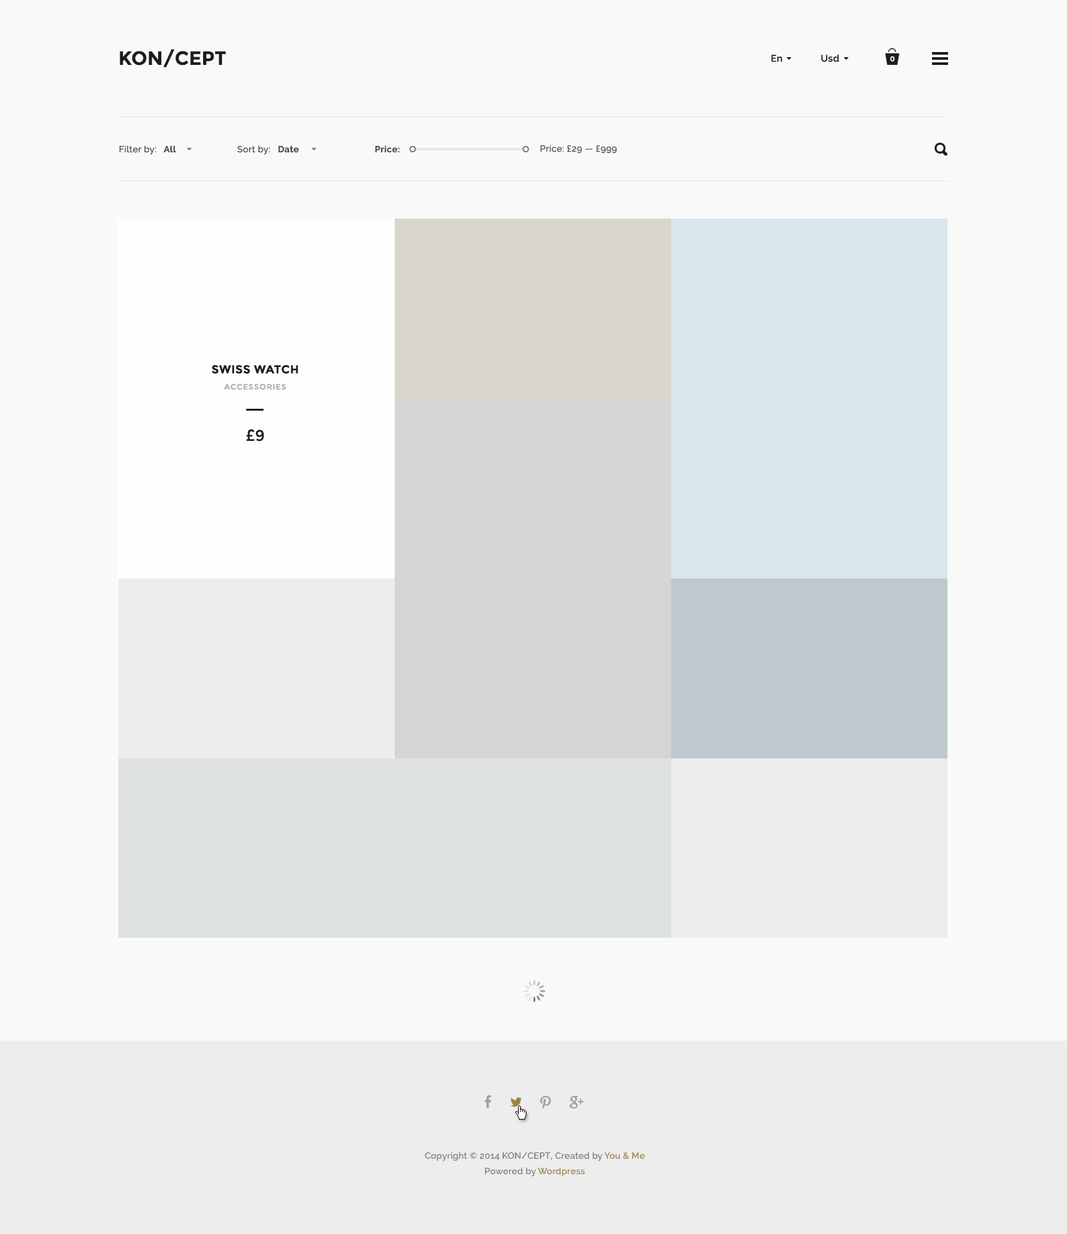
<style>
.page{position:relative;width:1067px;height:1234px;background:#f9f9f9}
.page>*{position:absolute;margin:0}
.t1{font:19.3px "Montserrat-Bold";color:#1d1d1d;text-transform:uppercase}
.t2{font:9.6px "Raleway-SemiBold";letter-spacing:0.025em;color:#1d1d1d}
.t3{font:6.8px "Montserrat-Regular";letter-spacing:-0.1em;color:#ffffff;text-transform:uppercase}
.t4{font:9px "Raleway-Medium";letter-spacing:0.025em;color:#4d4d4d}
.t5{font:9px "Raleway-Bold";letter-spacing:0.025em;color:#4d4d4d}
.t6{font:11.6px "Montserrat-Bold";letter-spacing:0.025em;color:#1d1d1d;text-transform:uppercase}
.t7{font:7.7px "Montserrat-Regular";letter-spacing:0.075em;color:#a8a8a8;text-transform:uppercase}
.t8{font:15.4px "Montserrat-Regular";color:#1d1d1d;text-transform:uppercase}
.t9{font:9px/15.4px "Raleway-SemiBold";letter-spacing:0.01em;color:#7d7d7d}
.t10{font:9px/15.4px "Raleway-SemiBold";letter-spacing:0.01em;color:#9e8348}
</style>
<div class="page">
<p class="t1" style="left:120px;top:49px;width:106px;height:19px">kON/CEPT</p>
<p class="t2" style="left:771px;top:55px;width:11px;height:7px">En</p>
<p class="t2" style="left:821px;top:55px;width:19px;height:7px">Usd</p>
<p class="t3" style="left:890px;top:56px;width:5px;height:6px">0</p>
<p class="t4" style="left:120px;top:145px;width:56px;height:10px">Filter by:<span class="t5">   All</span></p>
<p class="t4" style="left:237px;top:145px;width:62px;height:10px">Sort by:<span class="t5">   Date</span></p>
<p class="t5" style="left:375px;top:145px;width:25px;height:8px">Price:</p>
<p class="t4" style="left:541px;top:145px;width:76px;height:9px">Price: £29 — £999</p>
<p class="t6" style="left:212px;top:365px;width:86px;height:9px">swiss watch</p>
<p class="t7" style="left:224px;top:384px;width:62px;height:6px">accessories</p>
<p class="t8" style="left:246px;top:429px;width:18px;height:13px">£9</p>
<p class="t9" style="left:425px;top:1152px;width:220px;height:25px;text-align:center">Copyright © 2014 KON/CEPT, Created by <span class="t10">You &amp; Me<br></span>Powered by <span class="t10">Wordpress</span></p>
</div>
